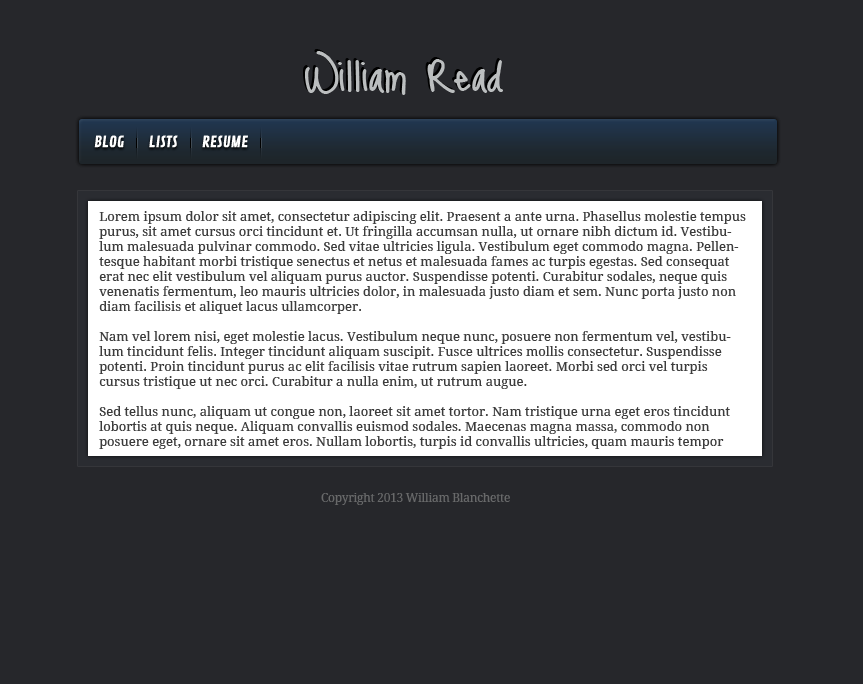
<style>
.page{position:relative;width:863px;height:684px;background:#26272b}
.page>*{position:absolute;margin:0}
.t1{font:56.3px "JustMeAgainDownHere";letter-spacing:-0.025em;color:#bbbebf}
.t2{font:15px "ContrailOne-Regular";color:#ffffff;font-weight:bold}
.t3{font:13px/15px "DroidSerif";color:#3b3b3b}
.t4{font:12px "DroidSerif";letter-spacing:-0.025em;color:#68696a}
</style>
<div class="page">
<p class="t1" style="left:305px;top:51px;width:198px;height:44px">William Read</p>
<p class="t2" style="left:94px;top:136px;width:154px;height:13px">BLOG       LISTS       RESUME</p>
<p class="t2" style="left:94px;top:135px;width:154px;height:13px">BLOG       LISTS       RESUME</p>
<p class="t3" style="left:99px;top:211px;width:647px;height:238px">Lorem ipsum dolor sit amet, consectetur adipiscing elit. Praesent a ante urna. Phasellus molestie tempus purus, sit amet cursus orci tincidunt et. Ut fringilla accumsan nulla, ut ornare nibh dictum id. Vestibulum malesuada pulvinar commodo. Sed vitae ultricies ligula. Vestibulum eget commodo magna. Pellentesque habitant morbi tristique senectus et netus et malesuada fames ac turpis egestas. Sed consequat erat nec elit vestibulum vel aliquam purus auctor. Suspendisse potenti. Curabitur sodales, neque quis venenatis fermentum, leo mauris ultricies dolor, in malesuada justo diam et sem. Nunc porta justo non diam facilisis et aliquet lacus ullamcorper.<br><br>Nam vel lorem nisi, eget molestie lacus. Vestibulum neque nunc, posuere non fermentum vel, vestibulum tincidunt felis. Integer tincidunt aliquam suscipit. Fusce ultrices mollis consectetur. Suspendisse potenti. Proin tincidunt purus ac elit facilisis vitae rutrum sapien laoreet. Morbi sed orci vel turpis cursus tristique ut nec orci. Curabitur a nulla enim, ut rutrum augue.<br><br>Sed tellus nunc, aliquam ut congue non, laoreet sit amet tortor. Nam tristique urna eget eros tincidunt lobortis at quis neque. Aliquam convallis euismod sodales. Maecenas magna massa, commodo non posuere eget, ornare sit amet eros. Nullam lobortis, turpis id convallis ultricies, quam mauris tempor neque, nec suscipit risus lacus nec urna. Donec non nulla mauris. Maecenas auctor turpis sit amet ligula aliquet in vehicula neque venenatis. Phasellus et nulla eu ipsum consequat ultricies eu ac dui. Etiam id lorem eu tellus condimentum mattis. Donec pulvinar nunc vitae justo blandit tincidunt. Praesent non egestas lacus. Nunc gravida, nulla sit amet luctus faucibus, purus purus hendrerit sapien, eget feugiat risus nisi a ante.</p>
<p class="t4" style="left:321px;top:493px;width:189px;height:12px">Copyright 2013 William Blanchette</p>
</div>
